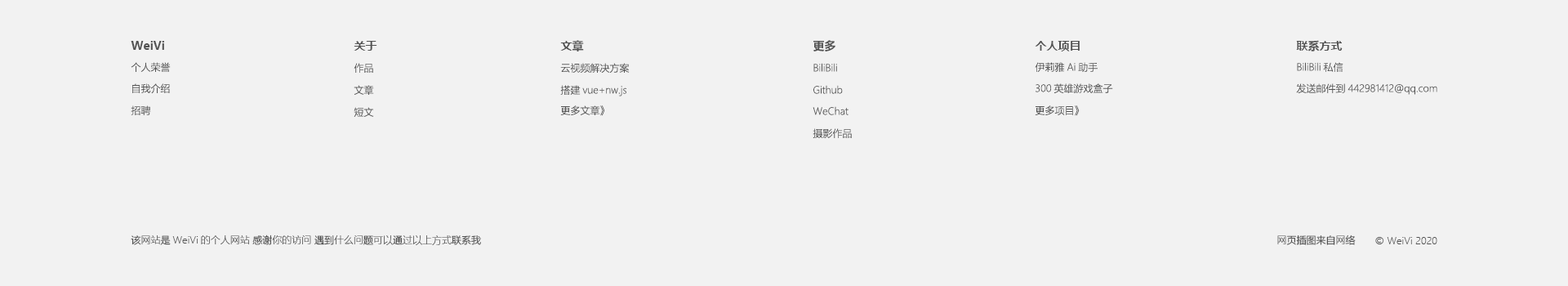
<style>
.page{position:relative;width:1568px;height:286px;background:#f2f2f2}
.page>*{position:absolute;margin:0}
.t1{font:11.4px "MicrosoftYaHeiUI-Bold";color:#525252}
.t2{font:9.8px "MicrosoftYaHeiUILight";color:#525252}
</style>
<div class="page">
<p class="t1" style="left:131px;top:41px;width:34px;height:9px">WeiVi</p>
<p class="t1" style="left:354px;top:41px;width:23px;height:10px">关于</p>
<p class="t1" style="left:560px;top:40px;width:24px;height:11px">文章</p>
<p class="t1" style="left:813px;top:40px;width:22px;height:11px">更多</p>
<p class="t1" style="left:1035px;top:41px;width:45px;height:10px">个人项目</p>
<p class="t1" style="left:1296px;top:40px;width:47px;height:11px">联系方式</p>
<p class="t2" style="left:131px;top:62px;width:40px;height:10px">个人荣誉</p>
<p class="t2" style="left:354px;top:63px;width:19px;height:10px">作品</p>
<p class="t2" style="left:560px;top:63px;width:70px;height:10px">云视频解决方案</p>
<p class="t2" style="left:813px;top:63px;width:24px;height:9px">BiliBili</p>
<p class="t2" style="left:1035px;top:62px;width:63px;height:10px">伊莉雅Ai助手</p>
<p class="t2" style="left:1297px;top:62px;width:46px;height:10px">BiliBili私信</p>
<p class="t2" style="left:132px;top:83px;width:38px;height:11px">自我介绍</p>
<p class="t2" style="left:354px;top:85px;width:20px;height:10px">文章</p>
<p class="t2" style="left:560px;top:85px;width:66px;height:11px">搭建vue+nw.js</p>
<p class="t2" style="left:813px;top:85px;width:30px;height:9px">Github</p>
<p class="t2" style="left:1036px;top:83px;width:77px;height:10px">300英雄游戏盒子</p>
<p class="t2" style="left:1296px;top:83px;width:141px;height:12px">发送邮件到442981412@qq.com</p>
<p class="t2" style="left:131px;top:105px;width:20px;height:10px">招聘</p>
<p class="t2" style="left:354px;top:107px;width:20px;height:10px">短文</p>
<p class="t2" style="left:560px;top:105px;width:45px;height:11px">更多文章》</p>
<p class="t2" style="left:813px;top:106px;width:36px;height:9px">WeChat</p>
<p class="t2" style="left:1035px;top:105px;width:45px;height:11px">更多项目》</p>
<p class="t2" style="left:813px;top:128px;width:39px;height:10px">摄影作品</p>
<p class="t2" style="left:131px;top:234px;width:350px;height:11px">该网站是WeiVi的个人网站 感谢你的访问 遇到什么问题可以通过以上方式联系我</p>
<p class="t2" style="left:1277px;top:234px;width:79px;height:11px">网页插图来自网络</p>
<p class="t2" style="left:1375px;top:237px;width:62px;height:7px">© WeiVi 2020</p>
</div>
